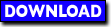
<style>
.page{position:relative;width:111px;height:27px;background:#1200ff}
.page>*{position:absolute;margin:0}
.t1{font:18px "GillSans-Bold";color:#ffffff;scale:0.8 1}
</style>
<div class="page">
<p class="t1" style="left:5px;top:4px;width:97px;height:13px">DOWNLOAD</p>
</div>
